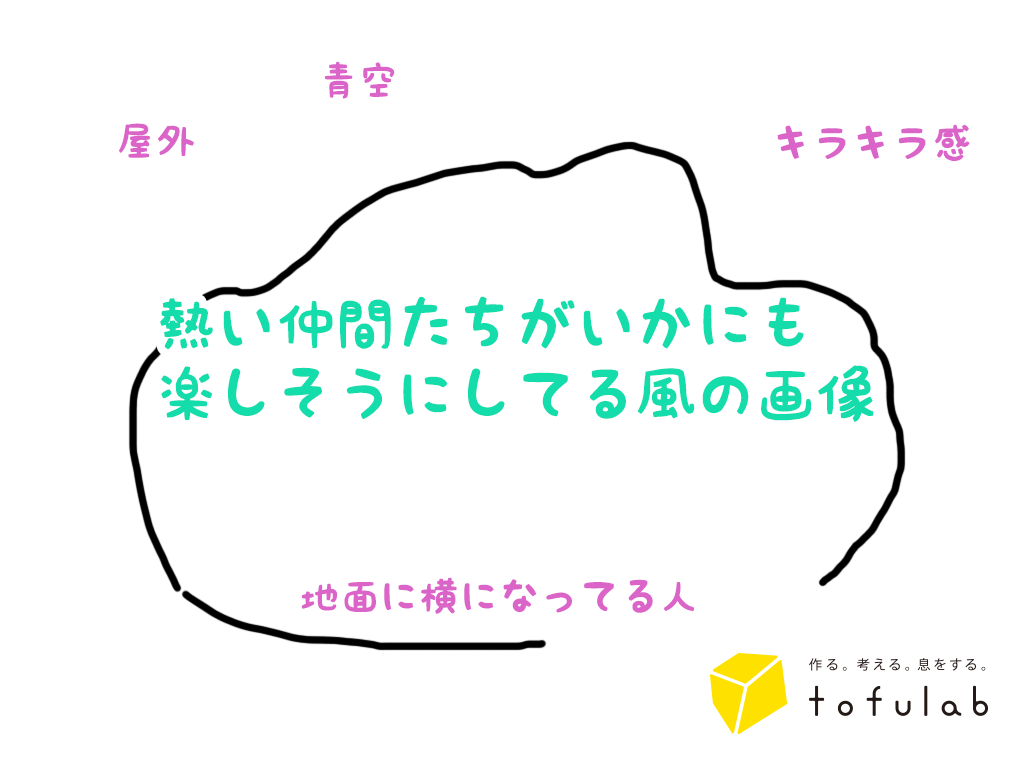
<style>
.page{position:relative;width:1024px;height:768px;background:#ffffff}
.page>*{position:absolute;margin:0}
.t1{font:40px "KFhimaji";color:#db64c9}
.t2{font:60px/70px "KFhimaji";color:#15dcab}
</style>
<div class="page">
<p class="t1" style="left:324px;top:61px;width:71px;height:38px">青空</p>
<p class="t1" style="left:119px;top:123px;width:75px;height:35px">屋外</p>
<p class="t1" style="left:777px;top:124px;width:193px;height:37px">キラキラ感</p>
<p class="t2" style="left:160px;top:296px;width:714px;height:126px">熱い仲間たちがいかにも<br>楽しそうにしてる風の画像</p>
<p class="t1" style="left:301px;top:577px;width:393px;height:37px">地面に横になってる人</p>
</div>
